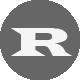
<style>
.page{position:relative;width:80px;height:80px;background:#666666}
.page>*{position:absolute;margin:0}
.t1{font:42px "LatinWide";color:#fefefe}
</style>
<div class="page">
<p class="t1" style="left:11px;top:28px;width:62px;height:28px;opacity:0.94">R</p>
</div>
